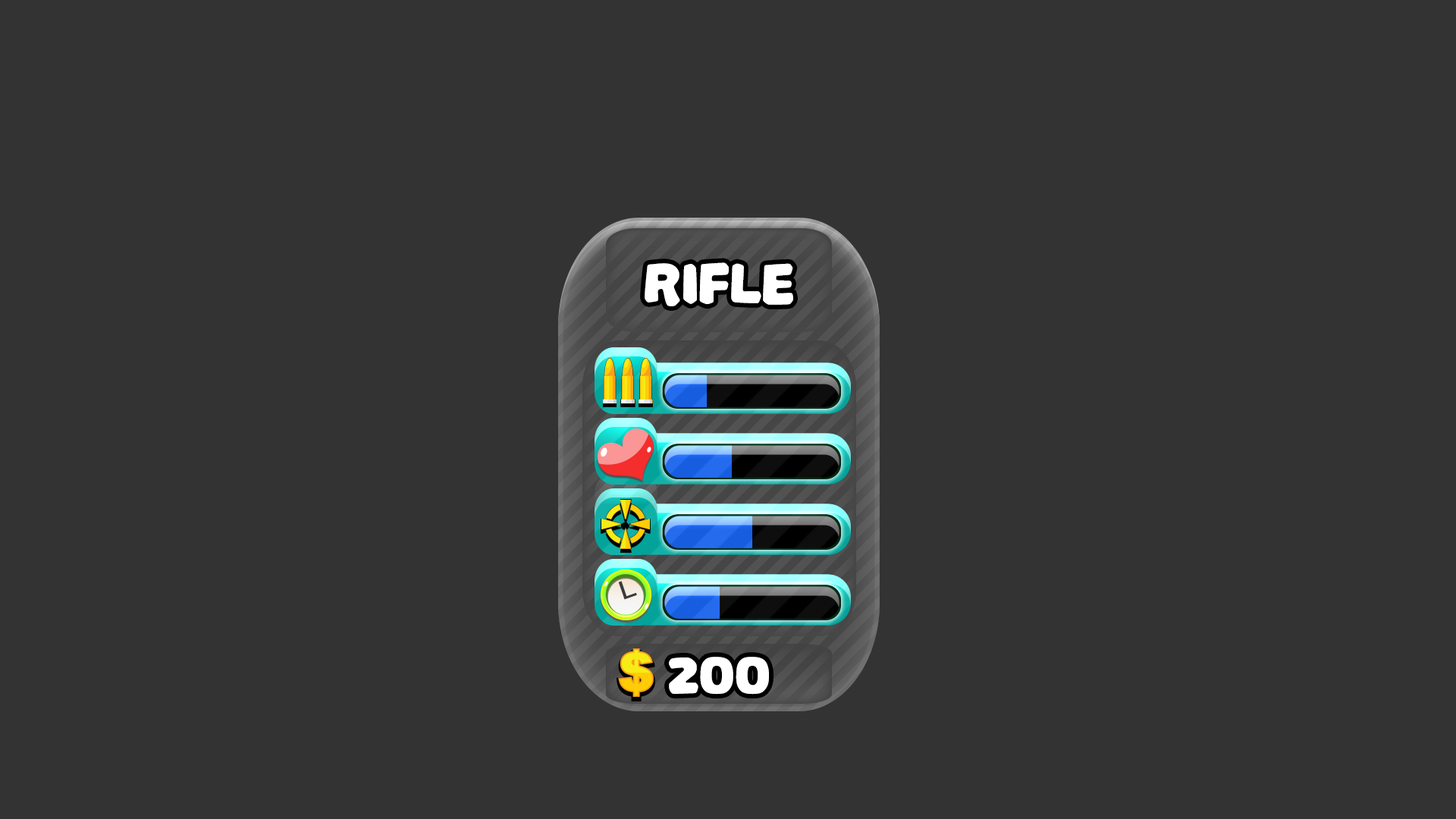
<style>
.page{position:relative;width:1456px;height:819px;background:#333333}
.page>*{position:absolute;margin:0}
.t1{font:61.8px "PalameciaTitling-Regular";letter-spacing:-0.02em;color:#ffffff}
</style>
<div class="page">
<p class="t1" style="left:645px;top:262px;width:148px;height:44px">Rifle</p>
<p class="t1" style="left:669px;top:657px;width:100px;height:38px">200</p>
</div>
